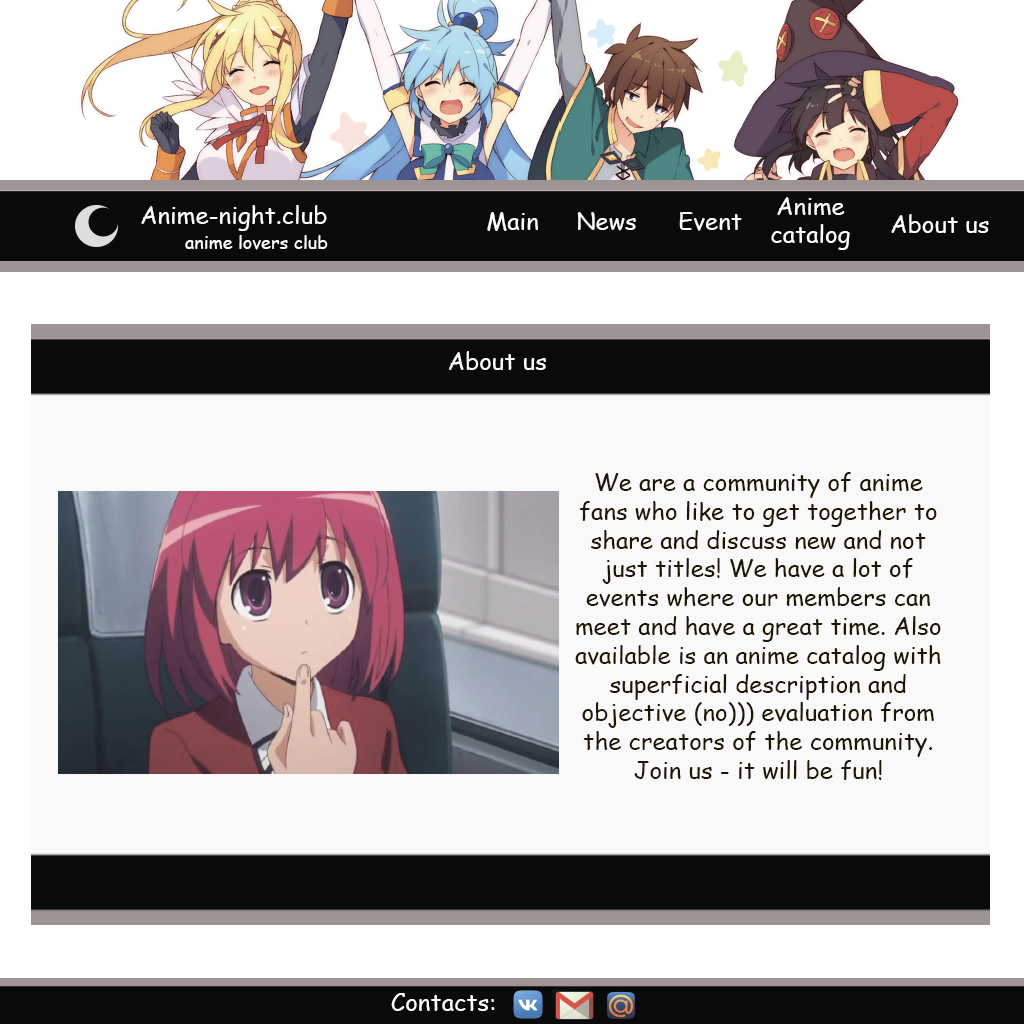
<style>
.page{position:relative;width:1024px;height:1024px;background:#faf9f9}
.page>*{position:absolute;margin:0}
.t1{font:24px "ComicSansMS";color:#ffffff}
.t2{font:18px "ComicSansMS";color:#ffffff}
.t3{font:24px "ComicSansMS";color:#fefefe}
.t4{font:24px "ComicSansMS";color:#201600}
</style>
<div class="page">
<p class="t1" style="left:771px;top:197px;width:79px;height:53px;text-align:center">Anime<br>catalog</p>
<p class="t1" style="left:141px;top:205px;width:186px;height:26px">Anime-night.club</p>
<p class="t1" style="left:487px;top:212px;width:51px;height:19px">Main</p>
<p class="t1" style="left:577px;top:212px;width:59px;height:19px">News</p>
<p class="t1" style="left:679px;top:212px;width:63px;height:19px">Event</p>
<p class="t1" style="left:891px;top:214px;width:98px;height:19px">About us</p>
<p class="t2" style="left:185px;top:235px;width:143px;height:15px">anime lovers club</p>
<p class="t3" style="left:449px;top:351px;width:97px;height:19px">About us</p>
<p class="t4" style="left:575px;top:472px;width:366px;height:308px;text-align:center">We are a community of anime fans who like to get together to share and discuss new and not just titles! We have a lot of events where our members can meet and have a great time. Also available is an anime catalog with superficial description and objective (no))) evaluation from the creators of the community. Join us - it will be fun!</p>
<p class="t1" style="left:391px;top:993px;width:104px;height:18px">Contacts:</p>
</div>
